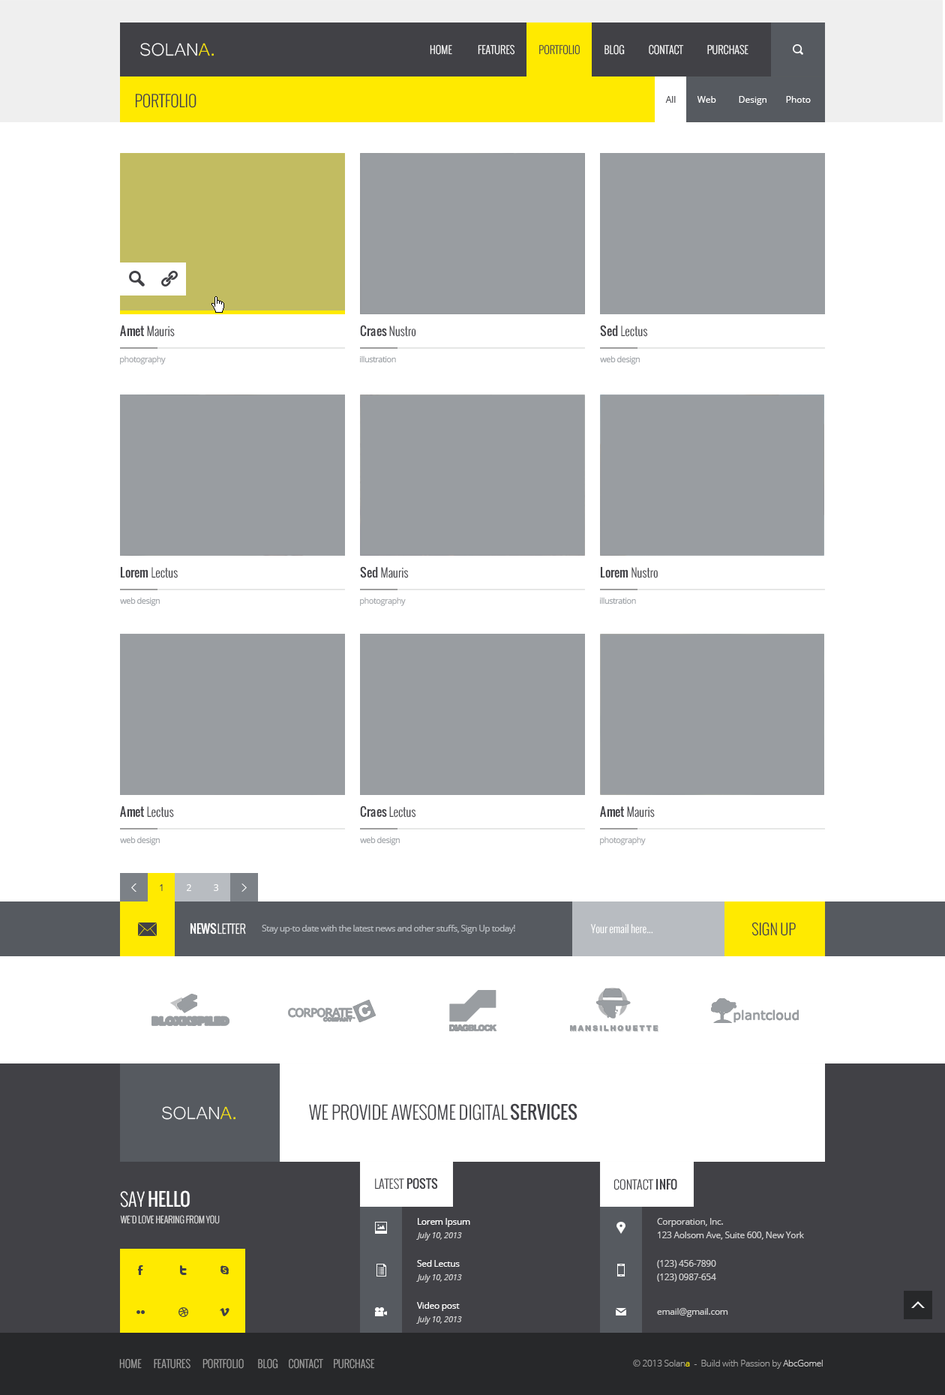
<style>
.page{position:relative;width:945px;height:1395px;background:#ffffff}
.page>*{position:absolute;margin:0}
.t1{font:22.5px "Microsoft-Yi-Baiti";color:#ffffff;text-transform:uppercase}
.t2{font:22.5px "Microsoft-Yi-Baiti";color:#ffea00;text-transform:uppercase}
.t3{font:10.5px "Oswald-Light";color:#fefefe;text-transform:uppercase}
.t4{font:10.5px "Oswald-Light";color:#414146;text-transform:uppercase}
.t5{font:15.8px "Oswald-Light";color:#414146;text-transform:uppercase}
.t6{font:9px "OpenSans";color:#414146}
.t7{font:9px "OpenSans";color:#ffffff}
.t8{font:12px "Oswald-Light";color:#414146}
.t9{font:12px "Oswald";color:#414146}
.t10{font:8.2px "OpenSans";letter-spacing:-0.05em;color:#9fa2a6}
.t11{font:8.2px "OpenSans";letter-spacing:-0.05em;color:#979ca1}
.t12{font:12px "Oswald-Light";color:#ffffff}
.t13{font:12px "Oswald";color:#ffffff}
.t14{font:9px "OpenSans";letter-spacing:-0.05em;color:#b8bcc1}
.t15{font:10.5px "Oswald-Light";letter-spacing:0.005em;color:#ffffff}
.t16{font:15px "Oswald-Light";color:#414146}
.t17{font:18px "Oswald-Light";color:#414146;text-transform:uppercase}
.t18{font:18px "Oswald";color:#414146;text-transform:uppercase}
.t19{font:18px "Oswald";color:#fdfdfd;text-transform:uppercase}
.t20{font:18px "Oswald-Light";color:#fdfdfd;text-transform:uppercase}
.t21{font:9px "Oswald-Light";color:#d7d7d7;text-transform:uppercase}
.t22{font:9px/13.5px "OpenSans";letter-spacing:-0.025em;color:#ffffff}
.t23{font:9px/13.5px "OpenSans";letter-spacing:-0.025em;color:#d1d1d1}
.t24{font:8.2px "OpenSans-Italic";letter-spacing:-0.025em;color:#d1d1d1}
.t25{font:9px "OpenSans";letter-spacing:-0.025em;color:#ffffff}
.t26{font:9px "OpenSans";letter-spacing:-0.025em;color:#d1d1d1}
.t27{font:10.5px "Oswald-Light";color:#a1a1a1}
.t28{font:9px "OpenSans-Light";letter-spacing:-0.025em;color:#a1a1a1}
.t29{font:9px "OpenSans-Light";letter-spacing:-0.025em;color:#ffea00}
.t30{font:9px "OpenSans-Light";letter-spacing:-0.025em;color:#d1d1d1}
</style>
<div class="page">
<p class="t1" style="left:140px;top:43px;width:74px;height:13px">solan<span class="t2">a.</span></p>
<p class="t3" style="left:430px;top:44px;width:318px;height:11px">Home               Features              <span class="t4">Portfolio</span>              Blog              Contact              Purchase</p>
<p class="t5" style="left:135px;top:93px;width:61px;height:15px">Portfolio</p>
<p class="t6" style="left:665px;top:96px;width:11px;height:7px">All</p>
<p class="t7" style="left:697px;top:96px;width:19px;height:7px">Web</p>
<p class="t7" style="left:739px;top:96px;width:27px;height:9px">Design</p>
<p class="t7" style="left:786px;top:96px;width:25px;height:7px">Photo</p>
<p class="t8" style="left:120px;top:325px;width:55px;height:12px"><span class="t9">Amet</span> Mauris</p>
<p class="t8" style="left:360px;top:325px;width:56px;height:12px"><span class="t9">Craes</span> Nustro</p>
<p class="t8" style="left:600px;top:325px;width:48px;height:12px"><span class="t9">Sed</span> Lectus</p>
<p class="t10" style="left:120px;top:356px;width:46px;height:8px">photography</p>
<p class="t11" style="left:360px;top:356px;width:36px;height:7px"><span class="t10"><br></span>illustration</p>
<p class="t11" style="left:600px;top:356px;width:40px;height:8px"><span class="t10"><br></span>web design</p>
<p class="t8" style="left:120px;top:566px;width:58px;height:12px"><span class="t9">Lorem</span> Lectus</p>
<p class="t8" style="left:360px;top:566px;width:49px;height:12px"><span class="t9">Sed</span> Mauris</p>
<p class="t8" style="left:600px;top:566px;width:58px;height:12px"><span class="t9">Lorem</span> Nustro</p>
<p class="t11" style="left:120px;top:597px;width:40px;height:9px"><span class="t10"><br></span>web design</p>
<p class="t10" style="left:360px;top:597px;width:46px;height:9px">photography</p>
<p class="t11" style="left:600px;top:597px;width:36px;height:7px"><span class="t10"><br></span>illustration</p>
<p class="t8" style="left:120px;top:806px;width:54px;height:12px"><span class="t9">Amet</span> Lectus</p>
<p class="t8" style="left:360px;top:806px;width:56px;height:12px"><span class="t9">Craes</span> Lectus</p>
<p class="t8" style="left:600px;top:806px;width:55px;height:12px"><span class="t9">Amet</span> Mauris</p>
<p class="t11" style="left:120px;top:836px;width:40px;height:9px"><span class="t10"><br></span>web design</p>
<p class="t11" style="left:360px;top:836px;width:40px;height:9px"><span class="t10"><br></span>web design</p>
<p class="t10" style="left:600px;top:836px;width:46px;height:9px">photography</p>
<p class="t6" style="left:160px;top:884px;width:3px;height:7px">1</p>
<p class="t7" style="left:187px;top:884px;width:4px;height:7px">2</p>
<p class="t7" style="left:214px;top:884px;width:4px;height:7px">3</p>
<p class="t12" style="left:190px;top:922px;width:56px;height:12px"><span class="t13">NEWS</span>LETTER</p>
<p class="t14" style="left:262px;top:925px;width:253px;height:9px">Stay up-to date with the latest news and other stuffs, Sign Up today!</p>
<p class="t15" style="left:590px;top:924px;width:63px;height:10px">Your email here...</p>
<p class="t16" style="left:752px;top:922px;width:44px;height:14px">SIGN UP</p>
<p class="t1" style="left:162px;top:1106px;width:74px;height:14px">solan<span class="t2">a.</span></p>
<p class="t17" style="left:309px;top:1103px;width:269px;height:17px">we provide awesome digital <span class="t18">services</span></p>
<p class="t8" style="left:375px;top:1178px;width:63px;height:12px">LATEST <span class="t9">POSTS</span></p>
<p class="t8" style="left:614px;top:1178px;width:63px;height:12px">CONTACT <span class="t9">INFO</span></p>
<p class="t19" style="left:120px;top:1190px;width:70px;height:18px"><span class="t20">Say </span>hello</p>
<p class="t21" style="left:120px;top:1215px;width:100px;height:9px">we'd love hearing from you</p>
<p class="t22" style="left:418px;top:1218px;width:52px;height:9px">Lorem Ipsum<br>ipsumage post</p>
<p class="t23" style="left:657px;top:1218px;width:147px;height:22px">Corporation, Inc.<br>123 Aolsom Ave, Suite 600, New York</p>
<p class="t24" style="left:416px;top:1232px;width:46px;height:8px">July 10, 2013</p>
<p class="t25" style="left:417px;top:1260px;width:43px;height:7px">Sed Lectus</p>
<p class="t23" style="left:657px;top:1260px;width:59px;height:22px">(123) 456-7890<br>(123) 0987-654</p>
<p class="t24" style="left:416px;top:1274px;width:46px;height:8px">July 10, 2013</p>
<p class="t25" style="left:417px;top:1302px;width:43px;height:9px">Video post</p>
<p class="t26" style="left:657px;top:1308px;width:71px;height:9px">email@gmail.com</p>
<p class="t24" style="left:416px;top:1316px;width:46px;height:8px">July 10, 2013</p>
<p class="t27" style="left:119px;top:1358px;width:256px;height:11px">HOME       FEATURES       PORTFOLIO        BLOG      CONTACT      PURCHASE</p>
<p class="t28" style="left:633px;top:1360px;width:190px;height:9px">© 2013 Solan<span class="t29">a </span> -  Build with Passion by <span class="t30">AbcGomel</span></p>
</div>
